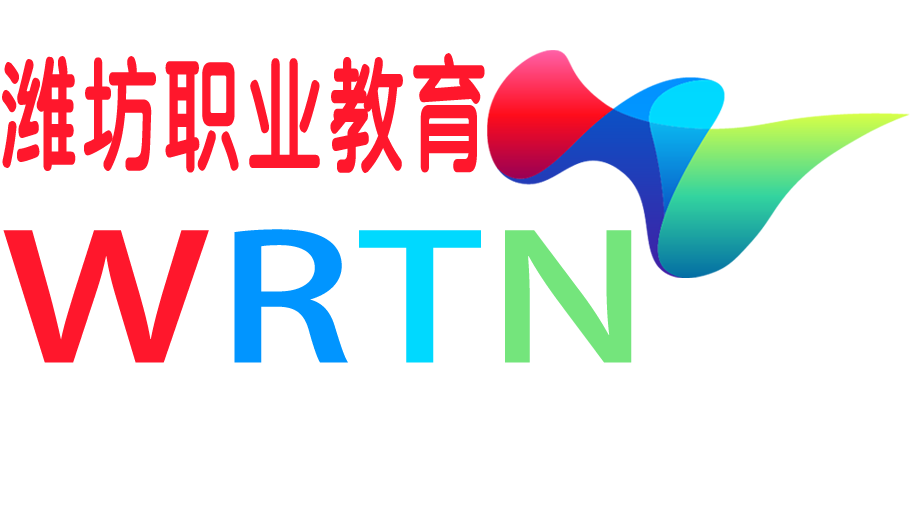
<style>
.page{position:relative;width:910px;height:512px;background:#ffffff}
.page>*{position:absolute;margin:0}
.t1{font:130px "SJyuantijian-C-Regular";letter-spacing:0.02em;color:#ff172c;scale:0.62 1}
.t2{font:172.5px "AdobeHeitiStd-Regular";letter-spacing:0.02em;color:#ff172c;scale:1.33 1}
.t3{font:172.5px "AdobeHeitiStd-Regular";letter-spacing:0.02em;color:#0195ff;scale:1.33 1}
.t4{font:172.5px "AdobeHeitiStd-Regular";letter-spacing:0.02em;color:#00d9ff;scale:1.33 1}
.t5{font:172.5px "AdobeHeitiStd-Regular";letter-spacing:0.02em;color:#74e57b;scale:1.33 1}
</style>
<div class="page">
<p class="t1" style="left:2px;top:53px;width:483px;height:120px">潍坊职业教育</p>
<p class="t2" style="left:3px;top:229px;width:629px;height:134px">W<span class="t3">R</span><span class="t4">T</span><span class="t5">N</span></p>
</div>
